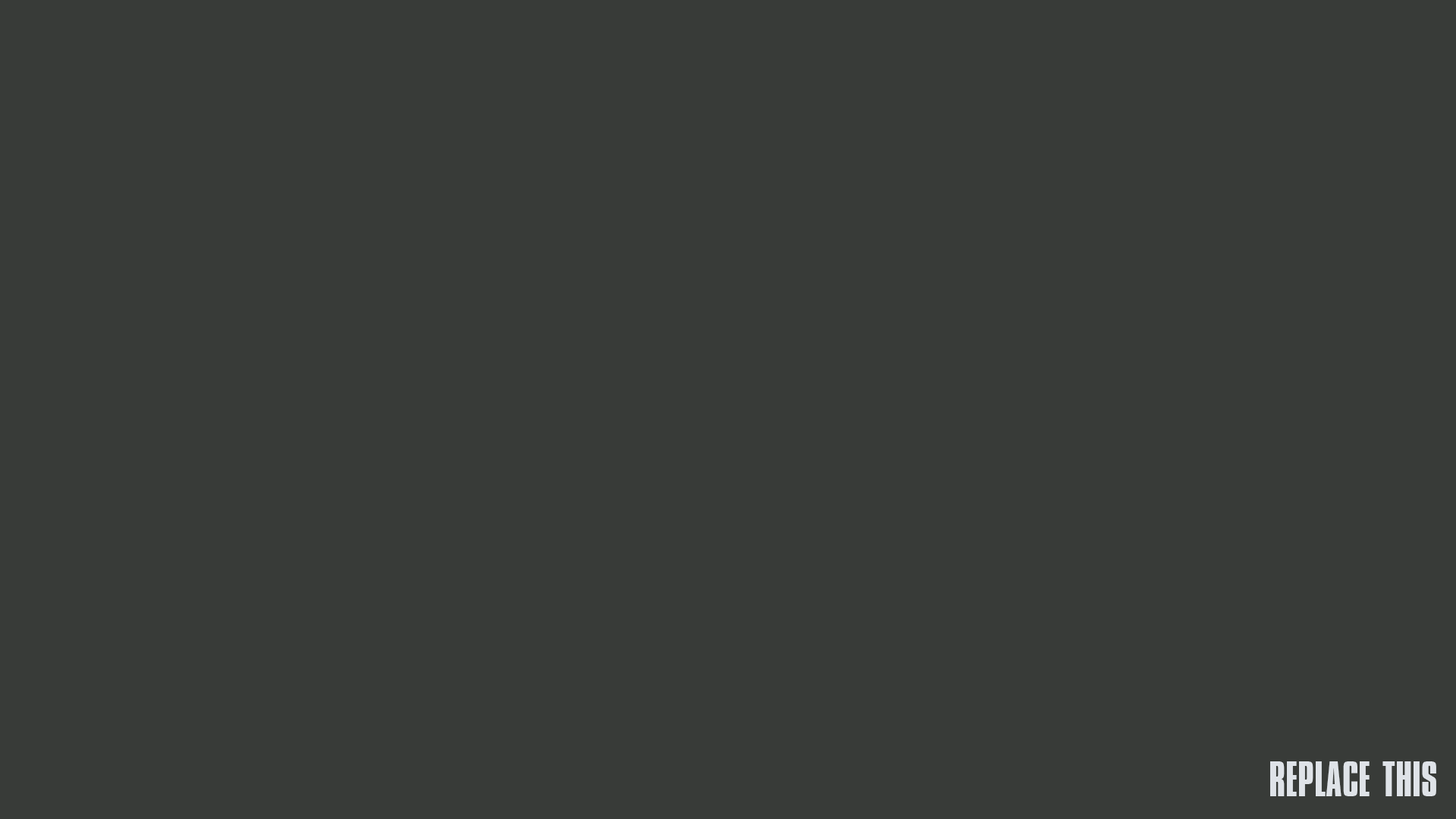
<style>
.page{position:relative;width:1456px;height:819px;background:#383b38}
.page>*{position:absolute;margin:0}
.t1{font:61.6px "Compacta";color:#dfe3e8;font-variant:small-caps}
</style>
<div class="page">
<p class="t1" style="left:1270px;top:761px;width:166px;height:35px">replace this</p>
</div>
